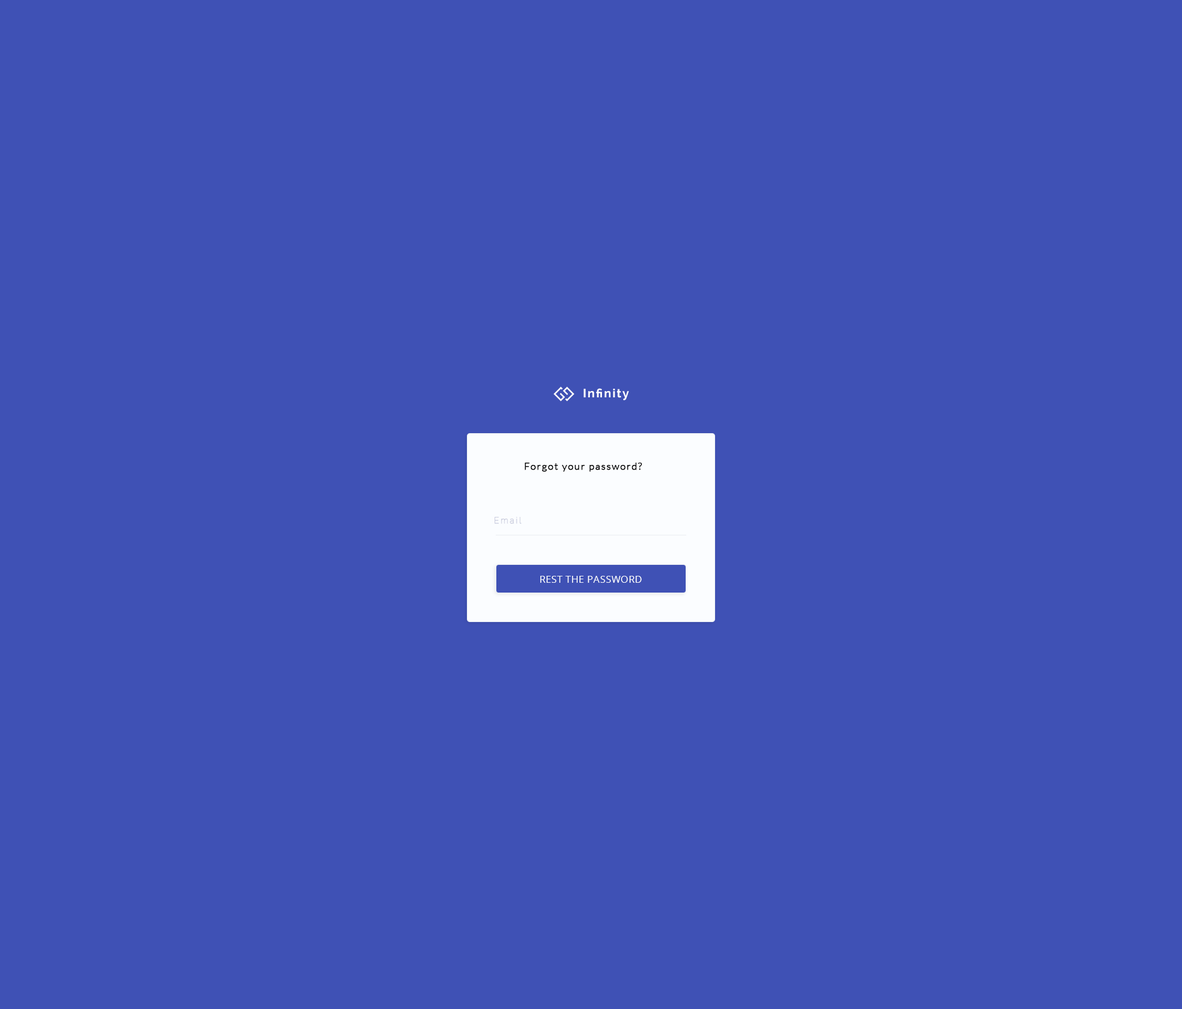
<style>
.page{position:relative;width:1182px;height:1009px;background:#3f51b5}
.page>*{position:absolute;margin:0}
.t1{font:12px "Raleway-Bold";letter-spacing:0.1em;color:#ffffff}
.t2{font:9.6px "Lato-Light";letter-spacing:0.1em;color:#000000;font-weight:bold}
.t3{font:8.1px "Raleway-Thin";letter-spacing:0.2em;color:#c9ccdd;font-weight:bold}
.t4{font:9.6px "OpenSans";letter-spacing:0.05em;color:#fbfdff}
</style>
<div class="page">
<p class="t1" style="left:584px;top:388px;width:45px;height:12px">Infinity</p>
<p class="t2" style="left:525px;top:462px;width:118px;height:10px">Forgot your password?</p>
<p class="t3" style="left:495px;top:517px;width:27px;height:7px">Email</p>
<p class="t4" style="left:540px;top:576px;width:102px;height:7px">REST THE PASSWORD</p>
</div>
